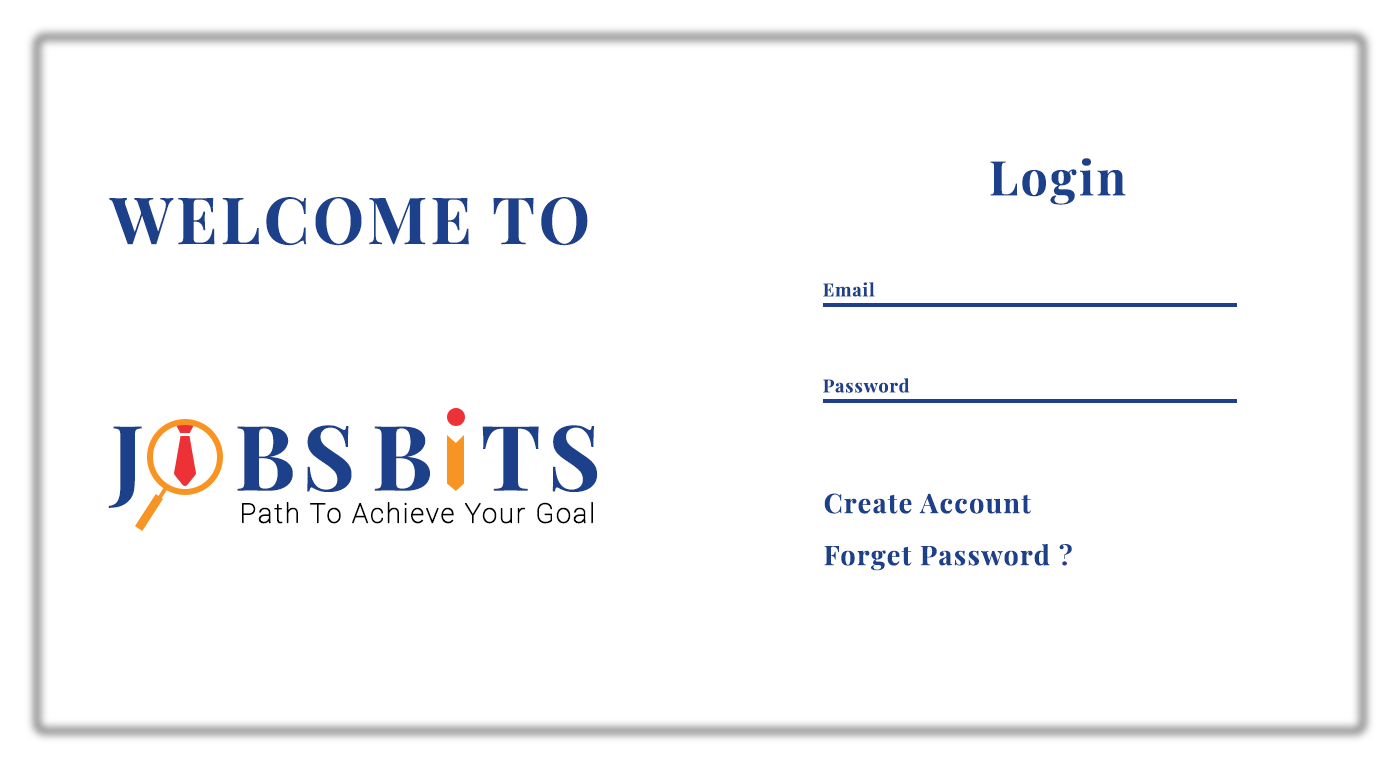
<style>
.page{position:relative;width:1400px;height:768px;background:#ffffff}
.page>*{position:absolute;margin:0}
.t1{font:48px "PlayfairDisplay-Bold";letter-spacing:0.05em;color:#1c408a;font-weight:bold}
.t2{font:65px "PlayfairDisplay-Bold";letter-spacing:0.05em;color:#1c408a;font-weight:bold}
.t3{font:70px "PlayfairDisplay-Bold";letter-spacing:0.05em;color:#1c408a;font-weight:bold}
.t4{font:18px "PlayfairDisplay-Bold";letter-spacing:0.05em;color:#1c408a;font-weight:bold}
.t5{font:90.6px "PlayfairDisplay-Bold";letter-spacing:0.075em;color:#1c408a;font-weight:bold}
.t6{font:27px/52px "PlayfairDisplay-Bold";letter-spacing:0.05em;color:#1c408a;font-weight:bold}
.t7{font:27px "Roboto-Thin";letter-spacing:0.05em;color:#000000;font-weight:bold}
</style>
<div class="page">
<p class="t1" style="left:990px;top:158px;width:136px;height:47px">Login</p>
<p class="t2" style="left:109px;top:197px;width:479px;height:49px"><span class="t3"><br></span>WELCOME TO</p>
<p class="t4" style="left:823px;top:282px;width:52px;height:15px">Email</p>
<p class="t4" style="left:823px;top:378px;width:87px;height:15px">Password</p>
<p class="t5" style="left:108px;top:425px;width:490px;height:83px">J   BS B  TS</p>
<p class="t6" style="left:824px;top:493px;width:248px;height:78px">Create Account <br>Forget Password ?</p>
<p class="t7" style="left:242px;top:502px;width:351px;height:22px">Path To Achieve Your Goal</p>
</div>
